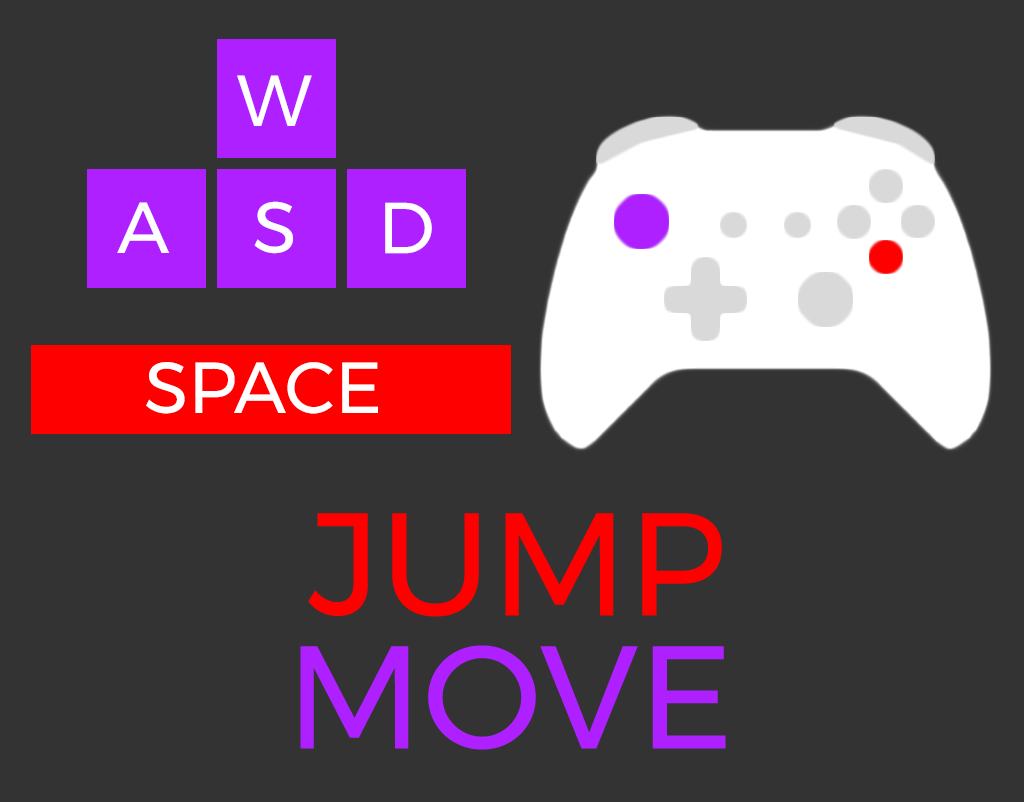
<style>
.page{position:relative;width:1024px;height:802px;background:#333333}
.page>*{position:absolute;margin:0}
.t1{font:72px "Montserrat-Regular";color:#ffffff}
.t2{font:145.7px "Montserrat-Regular";color:#ff0000}
.t3{font:145.7px "Montserrat-Regular";color:#ae20ff}
</style>
<div class="page">
<p class="t1" style="left:237px;top:75px;width:75px;height:51px">W</p>
<p class="t1" style="left:117px;top:202px;width:53px;height:51px">A</p>
<p class="t1" style="left:254px;top:201px;width:39px;height:53px">S</p>
<p class="t1" style="left:385px;top:202px;width:47px;height:52px">D</p>
<p class="t1" style="left:146px;top:362px;width:232px;height:52px">SPACE</p>
<p class="t2" style="left:308px;top:513px;width:414px;height:104px">JUMP</p>
<p class="t3" style="left:300px;top:645px;width:426px;height:105px">MOVE</p>
</div>
